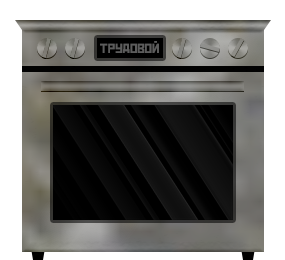
<style>
.page{position:relative;width:285px;height:260px;background:#ffffff}
.page>*{position:absolute;margin:0}
.t1{font:9.2px "soviet-font";color:#5c5c5c}
</style>
<div class="page">
<p class="t1" style="left:100px;top:41px;width:59px;height:12px">ТРУДОВОЙ</p>
</div>
